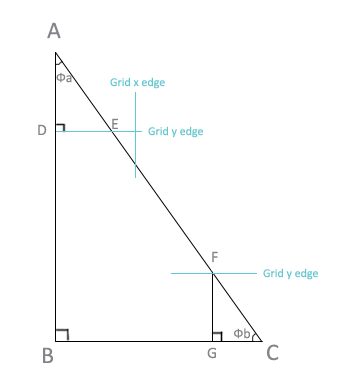
<style>
.page{position:relative;width:354px;height:386px;background:#ffffff}
.page>*{position:absolute;margin:0}
.t1{font:24px "Calibri";color:#84848a}
.t2{font:14px "Calibri";color:#84848a}
.t3{font:12px "Calibri";color:#60c8cf}
.t4{font:16px "Calibri";color:#84848a}
</style>
<div class="page">
<p class="t1" style="left:47px;top:22px;width:14px;height:17px">A</p>
<p class="t2" style="left:56px;top:72px;width:16px;height:11px">Фa</p>
<p class="t3" style="left:110px;top:77px;width:55px;height:12px">Grid x edge</p>
<p class="t4" style="left:38px;top:124px;width:9px;height:11px">D</p>
<p class="t4" style="left:112px;top:118px;width:6px;height:11px">E</p>
<p class="t3" style="left:148px;top:126px;width:55px;height:12px">Grid y edge</p>
<p class="t4" style="left:212px;top:251px;width:6px;height:12px">F</p>
<p class="t3" style="left:263px;top:268px;width:55px;height:12px">Grid y edge</p>
<p class="t2" style="left:234px;top:328px;width:16px;height:11px">Фb</p>
<p class="t1" style="left:43px;top:347px;width:11px;height:16px">B</p>
<p class="t4" style="left:207px;top:347px;width:9px;height:12px">G</p>
<p class="t1" style="left:267px;top:344px;width:12px;height:17px">C</p>
</div>
